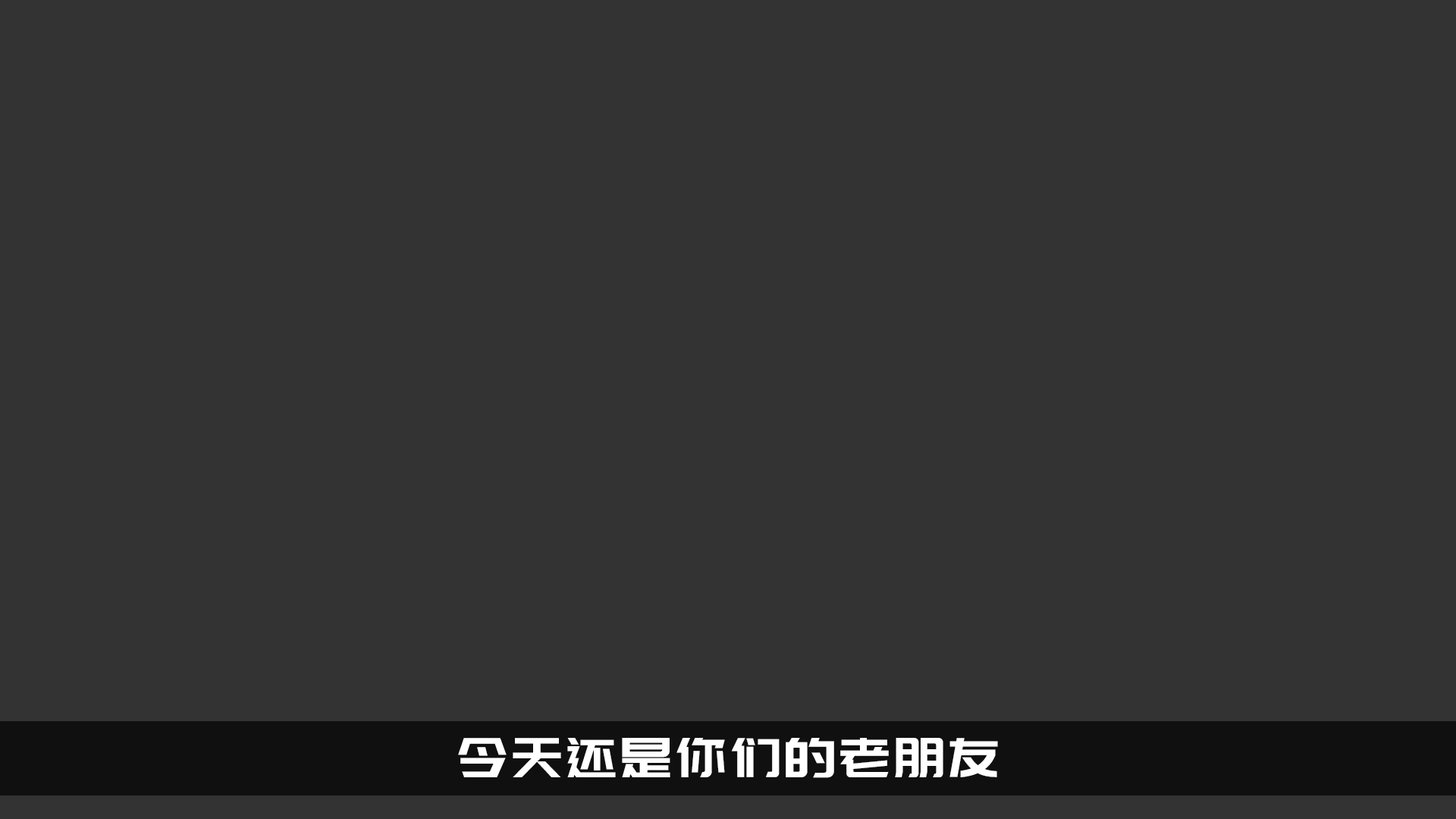
<style>
.page{position:relative;width:1456px;height:819px;background:#333333}
.page>*{position:absolute;margin:0}
.t1{font:54.6px "PangMenZhengDao-3";color:#ffffff}
</style>
<div class="page">
<p class="t1" style="left:458px;top:738px;width:540px;height:40px">今天还是你们的老朋友</p>
</div>
